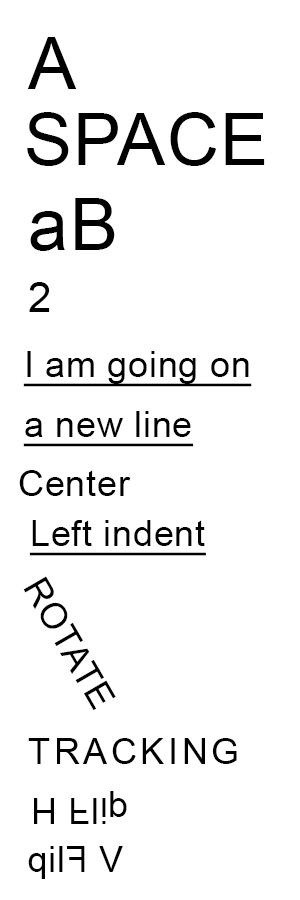
<style>
.page{position:relative;width:300px;height:900px;background:#ffffff}
.page>*{position:absolute;margin:0}
.t1{font:72px "ArialMT";letter-spacing:0.02em;color:#000000;text-transform:uppercase}
.t2{font:72px "ArialMT";letter-spacing:0.02em;color:#000000}
.t3{font:36px/60px "ArialMT";letter-spacing:0.02em;color:#000000;text-decoration:underline}
.t4{font:36px "ArialMT";letter-spacing:0.02em;color:#000000}
.t5{font:36px "ArialMT";letter-spacing:0.02em;color:#000000;text-decoration:underline}
.t6{font:36px "ArialMT";letter-spacing:0.1em;color:#000000}
</style>
<div class="page">
<p class="t1" style="left:27px;top:37px;width:50px;height:52px">A</p>
<p class="t1" style="left:27px;top:112px;width:238px;height:54px">Space</p>
<p class="t2" style="left:30px;top:198px;width:85px;height:53px">aB</p>
<p class="t2" style="left:29px;top:282px;width:21px;height:30px">2</p>
<p class="t3" style="left:23px;top:351px;width:229px;height:96px">I am going on<br>a new line</p>
<p class="t4" style="left:19px;top:470px;width:112px;height:26px">Center</p>
<p class="t5" style="left:29px;top:520px;width:177px;height:36px">Left indent</p>
<p class="t4" style="left:23px;top:576px;width:93px;height:135px;rotate:60deg">ROTATE</p>
<p class="t6" style="left:28px;top:738px;width:209px;height:26px">TRACKING</p>
<p class="t4" style="left:34px;top:791px;width:93px;height:33px">H Flip</p>
<p class="t4" style="left:28px;top:846px;width:95px;height:33px;rotate:180deg">V Flip</p>
</div>
